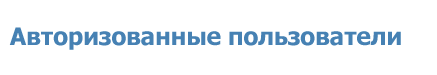
<style>
.page{position:relative;width:437px;height:75px;background:#ffffff}
.page>*{position:absolute;margin:0}
.t1{font:24px "Tahoma-Bold";color:#4682b4}
</style>
<div class="page">
<p class="t1" style="left:9px;top:27px;width:392px;height:23px">Авторизованные пользователи</p>
</div>
